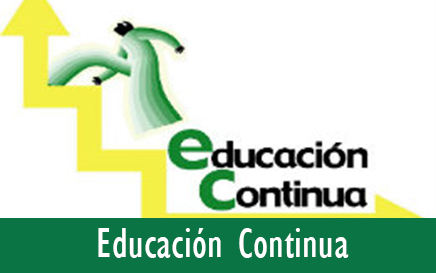
<style>
.page{position:relative;width:436px;height:273px;background:#ffffff}
.page>*{position:absolute;margin:0}
.t1{font:44px "GillSansMT-Condensed";letter-spacing:0.005em;color:#ffffff}
</style>
<div class="page">
<p class="t1" style="left:98px;top:228px;width:251px;height:30px">Educación Continua</p>
</div>
